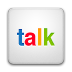
<style>
.page{position:relative;width:72px;height:72px;background:#ffffff}
.page>*{position:absolute;margin:0}
.t1{font:24px "Helvetica-Bold";letter-spacing:-0.005em;color:#1172bd;scale:0.94 1}
.t2{font:24px "Helvetica-Bold";letter-spacing:-0.005em;color:#ff0021;scale:0.94 1}
.t3{font:24px "Helvetica-Bold";letter-spacing:-0.005em;color:#ffa401;scale:0.94 1}
.t4{font:24px "Helvetica-Bold";letter-spacing:-0.005em;color:#80c200;scale:0.94 1}
</style>
<div class="page">
<p class="t1" style="left:17px;top:28px;width:38px;height:18px">t<span class="t2">a</span><span class="t3">l</span><span class="t4">k</span></p>
</div>
